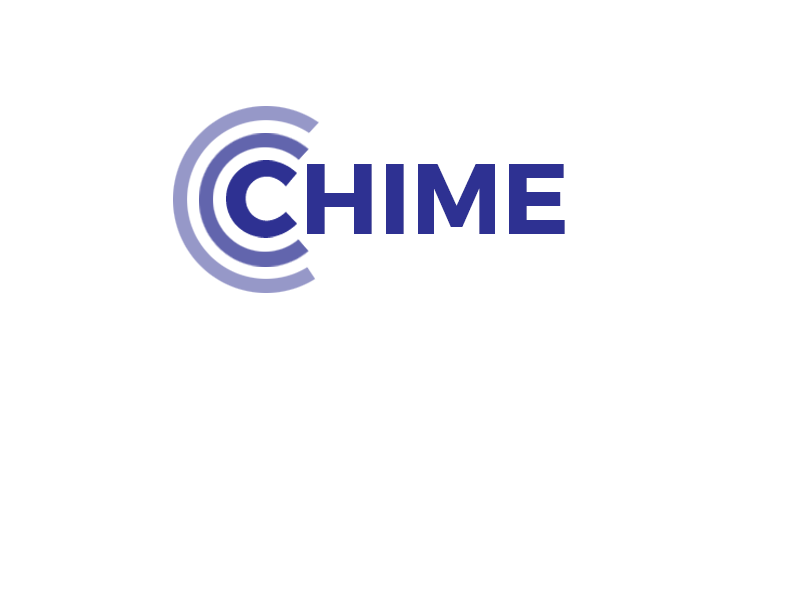
<style>
.page{position:relative;width:800px;height:600px;background:#ffffff}
.page>*{position:absolute;margin:0}
.t1{font:100px "Montserrat-Bold";color:#2e3192}
</style>
<div class="page">
<p class="t1" style="left:233px;top:164px;width:332px;height:71px">CHIME</p>
</div>
